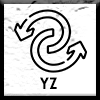
<style>
.page{position:relative;width:100px;height:100px;background:#ffffff}
.page>*{position:absolute;margin:0}
.t1{font:16px "CenturyGothic-Bold";color:#000000}
</style>
<div class="page">
<p class="t1" style="left:40px;top:77px;width:17px;height:12px">YZ</p>
</div>
